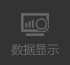
<style>
.page{position:relative;width:70px;height:65px;background:#333333}
.page>*{position:absolute;margin:0}
.t1{font:11.9px "MicrosoftYaHei";color:#666666}
</style>
<div class="page">
<p class="t1" style="left:11px;top:43px;width:48px;height:13px">数据显示</p>
</div>
